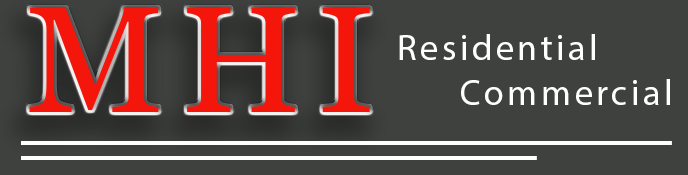
<style>
.page{position:relative;width:688px;height:175px;background:#3f413f}
.page>*{position:absolute;margin:0}
.t1{font:36px "MyriadPro-Regular";letter-spacing:0.1em;color:#ffffff}
</style>
<div class="page">
<p class="t1" style="left:399px;top:34px;width:196px;height:26px">Residential</p>
<p class="t1" style="left:461px;top:79px;width:209px;height:26px">Commercial</p>
</div>
